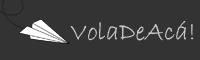
<style>
.page{position:relative;width:200px;height:60px;background:#333333}
.page>*{position:absolute;margin:0}
.t1{font:26.7px "BradleyHandITC";color:#cecece}
</style>
<div class="page">
<p class="t1" style="left:70px;top:21px;width:124px;height:20px">VolaDeAcá!</p>
</div>
